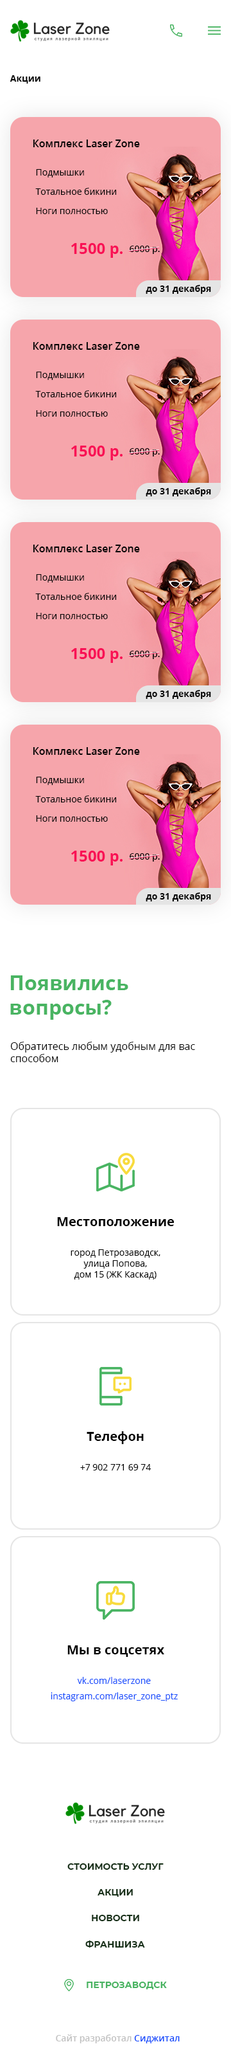
<style>
.page{position:relative;width:231px;height:2053px;background:#ffffff}
.page>*{position:absolute;margin:0}
.t1{font:9px "OpenSans-Bold";color:#000000}
.t2{font:10.3px "OpenSans-Semibold";color:#000000}
.t3{font:9px/19.3px "OpenSans";color:#000000}
.t4{font:15.4px "OpenSans-Bold";color:#f91155}
.t5{font:9px "OpenSans-Semibold";color:#000000}
.t6{font:20.6px "OpenSans-Bold";color:#49b462}
.t7{font:10.3px "OpenSans";color:#000000}
.t8{font:12.9px "OpenSans-Bold";color:#000000}
.t9{font:9px "OpenSans";color:#000000}
.t10{font:9px/15.4px "OpenSans";color:#184ffc}
.t11{font:9px "Montserrat-Bold";color:#183119;text-transform:uppercase}
.t12{font:9px "Montserrat-Bold";color:#49b462;text-transform:uppercase}
.t13{font:9px "OpenSans-Semibold";color:#c2c2c2}
.t14{font:9px "OpenSans-Semibold";color:#184ffc}
</style>
<div class="page">
<p class="t1" style="left:10px;top:75px;width:30px;height:9px">Акции</p>
<p class="t2" style="left:33px;top:140px;width:107px;height:7px">Комплекс Laser Zone</p>
<p class="t3" style="left:35px;top:169px;width:81px;height:45px">Подмышки<br>Тотальное бикини<br>Ноги полностью</p>
<p class="t4" style="left:71px;top:243px;width:52px;height:15px">1500 р.</p>
<p class="t5" style="left:130px;top:246px;width:30px;height:8px">6000 р.</p>
<p class="t1" style="left:146px;top:285px;width:66px;height:9px">до 31 декабря</p>
<p class="t2" style="left:33px;top:342px;width:107px;height:8px">Комплекс Laser Zone</p>
<p class="t3" style="left:35px;top:372px;width:81px;height:45px">Подмышки<br>Тотальное бикини<br>Ноги полностью</p>
<p class="t4" style="left:71px;top:446px;width:52px;height:14px">1500 р.</p>
<p class="t5" style="left:130px;top:448px;width:30px;height:8px">6000 р.</p>
<p class="t1" style="left:146px;top:487px;width:66px;height:9px">до 31 декабря</p>
<p class="t2" style="left:33px;top:544px;width:107px;height:8px">Комплекс Laser Zone</p>
<p class="t3" style="left:35px;top:574px;width:81px;height:45px">Подмышки<br>Тотальное бикини<br>Ноги полностью</p>
<p class="t4" style="left:71px;top:648px;width:52px;height:15px">1500 р.</p>
<p class="t5" style="left:130px;top:651px;width:30px;height:8px">6000 р.</p>
<p class="t1" style="left:146px;top:690px;width:66px;height:9px">до 31 декабря</p>
<p class="t2" style="left:33px;top:747px;width:107px;height:8px">Комплекс Laser Zone</p>
<p class="t3" style="left:35px;top:777px;width:81px;height:45px">Подмышки<br>Тотальное бикини<br>Ноги полностью</p>
<p class="t4" style="left:71px;top:851px;width:52px;height:14px">1500 р.</p>
<p class="t5" style="left:130px;top:853px;width:30px;height:8px">6000 р.</p>
<p class="t1" style="left:146px;top:892px;width:66px;height:9px">до 31 декабря</p>
<p class="t6" style="left:10px;top:975px;width:119px;height:45px">Появились<br>вопросы?</p>
<p class="t7" style="left:10px;top:1041px;width:185px;height:21px">Обратитесь любым удобным для вас способом</p>
<p class="t8" style="left:57px;top:1217px;width:117px;height:9px">Местоположение</p>
<p class="t9" style="left:71px;top:1249px;width:90px;height:30px;text-align:center">город Петрозаводск,<br>улица Попова, <br>дом 15 (ЖК Каскад)</p>
<p class="t8" style="left:87px;top:1431px;width:57px;height:13px">Телефон</p>
<p class="t9" style="left:80px;top:1464px;width:72px;height:6px">+7 902 771 69 74</p>
<p class="t8" style="left:68px;top:1645px;width:97px;height:12px">Мы в соцсетях</p>
<p class="t10" style="left:51px;top:1677px;width:127px;height:24px;text-align:center">vk.com/laserzone<br>instagram.com/laser_zone_ptz</p>
<p class="t11" style="left:68px;top:1863px;width:96px;height:6px">Стоимость услуг</p>
<p class="t11" style="left:98px;top:1889px;width:35px;height:7px">Акции</p>
<p class="t11" style="left:92px;top:1914px;width:48px;height:7px">Новости</p>
<p class="t11" style="left:86px;top:1940px;width:59px;height:7px">Франшиза</p>
<p class="t12" style="left:87px;top:1981px;width:80px;height:8px">Петрозаводск</p>
<p class="t13" style="left:56px;top:2034px;width:124px;height:9px">Сайт разработал <span class="t14">Сиджитал</span></p>
</div>
